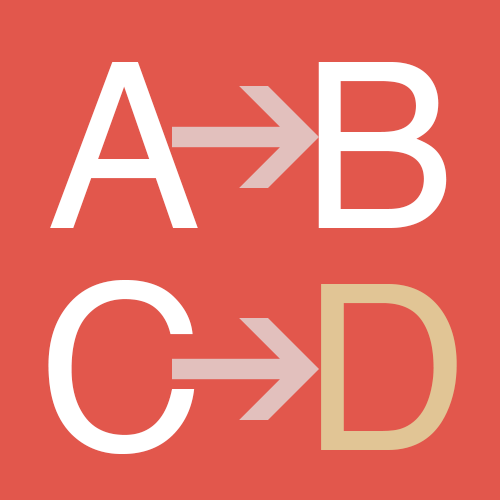
<style>
.page{position:relative;width:500px;height:500px;background:#e2574c}
.page>*{position:absolute;margin:0}
.t1{font:230px "Helvetica";color:#ffffff}
.t2{font:230px "Helvetica";color:#e1c595}
</style>
<div class="page">
<p class="t1" style="left:50px;top:62px;width:148px;height:166px">A</p>
<p class="t1" style="left:318px;top:62px;width:129px;height:166px">B</p>
<p class="t1" style="left:48px;top:280px;width:147px;height:174px">C</p>
<p class="t2" style="left:321px;top:284px;width:136px;height:166px">D</p>
</div>
